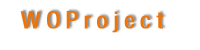
<style>
.page{position:relative;width:200px;height:50px;background:#ffffff}
.page>*{position:absolute;margin:0}
.t1{font:23.5px "HelmetCondensedBold";letter-spacing:0.2em;color:#ec740a;font-weight:bold;scale:1.09 1}
</style>
<div class="page">
<p class="t1" style="left:20px;top:11px;width:144px;height:22px">WOProject</p>
</div>
